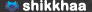
<style>
.page{position:relative;width:92px;height:12px}
.page>*{position:absolute;margin:0}
.t1{font:14px "ArialRoundedMTBold";color:#ffffff;font-weight:bold}
</style>
<div class="page">
<p class="t1" style="left:23px;top:0px;width:63px;height:11px">shikkhaa</p>
</div>
